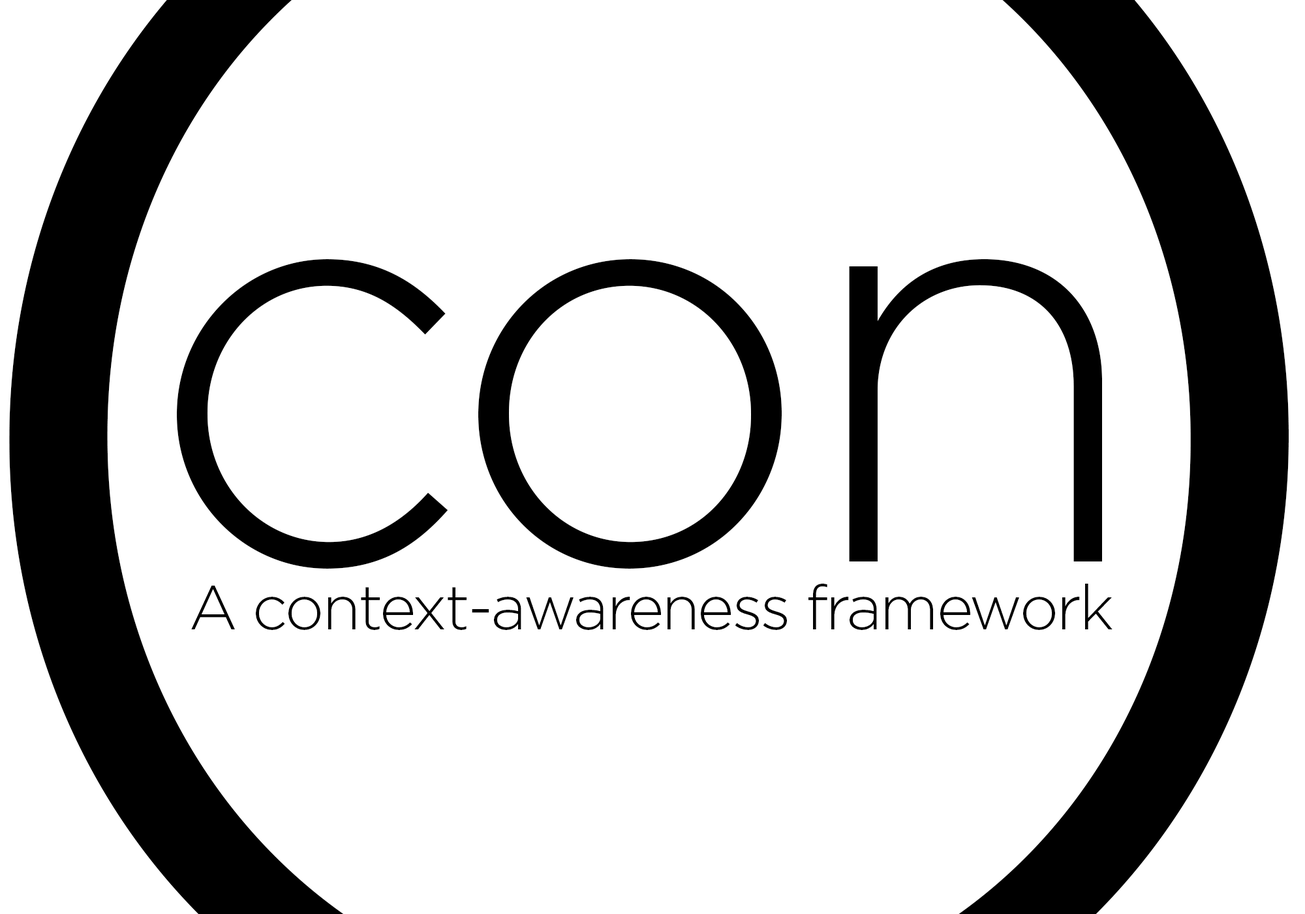
<style>
.page{position:relative;width:1305px;height:914px;background:#ffffff}
.page>*{position:absolute;margin:0}
.t1{font:578.7px "Gotham-Light";letter-spacing:-0.035em;color:#000000}
.t2{font:62.1px "Gotham-Light";letter-spacing:-0.035em;color:#000000}
</style>
<div class="page">
<p class="t1" style="left:177px;top:258px;width:925px;height:310px">con</p>
<p class="t2" style="left:191px;top:583px;width:922px;height:47px">A context-awareness framework</p>
</div>
